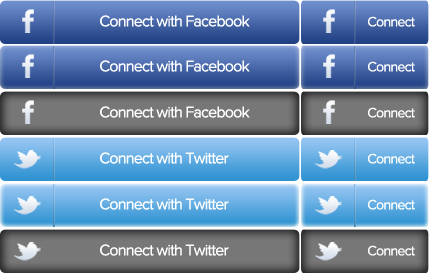
<style>
.page{position:relative;width:431px;height:277px}
.page>*{position:absolute;margin:0}
.t1{font:16px "ProximaNova-Regular";letter-spacing:-0.05em;color:#ffffff}
.t2{font:14px "ProximaNova-Regular";letter-spacing:-0.05em;color:#ffffff}
</style>
<div class="page">
<p class="t1" style="left:100px;top:15px;width:150px;height:12px">Connect with Facebook</p>
<p class="t2" style="left:368px;top:16px;width:47px;height:11px">Connect</p>
<p class="t1" style="left:100px;top:60px;width:150px;height:12px">Connect with Facebook</p>
<p class="t2" style="left:368px;top:61px;width:47px;height:11px">Connect</p>
<p class="t1" style="left:100px;top:106px;width:150px;height:12px">Connect with Facebook</p>
<p class="t2" style="left:368px;top:107px;width:47px;height:11px">Connect</p>
<p class="t1" style="left:100px;top:152px;width:129px;height:12px">Connect with Twitter</p>
<p class="t2" style="left:368px;top:153px;width:47px;height:11px">Connect</p>
<p class="t1" style="left:100px;top:198px;width:129px;height:12px">Connect with Twitter</p>
<p class="t2" style="left:368px;top:199px;width:47px;height:11px">Connect</p>
<p class="t1" style="left:100px;top:244px;width:129px;height:12px">Connect with Twitter</p>
<p class="t2" style="left:368px;top:245px;width:47px;height:11px">Connect</p>
</div>
